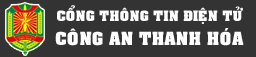
<style>
.page{position:relative;width:256px;height:57px;background:#333333}
.page>*{position:absolute;margin:0}
.t1{font:16px "VNI-Auchon-Bold";color:#ffffff;scale:1.04 1}
.t2{font:20px "VNI-Auchon-Bold";color:#ffffff;scale:1.04 1}
</style>
<div class="page">
<p class="t1" style="left:55px;top:5px;width:189px;height:41px;text-align:center">COÅNG THOÂNG TIN ÑIEÄN TÖÛ<br><span class="t2">COÂNG AN THANH HOÙA</span></p>
</div>
